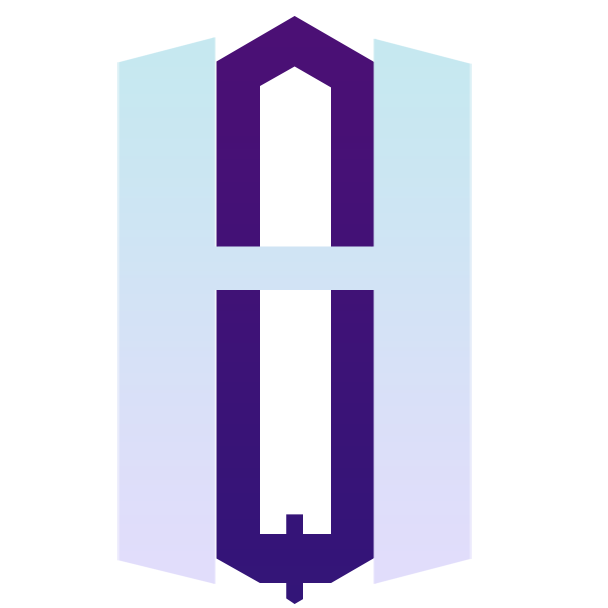
<style>
.page{position:relative;width:608px;height:608px;background:#ffffff}
.page>*{position:absolute;margin:0}
.t1{font:700px "Hex-monograms";letter-spacing:0.01em;color:#3f1377}
</style>
<div class="page">
<p class="t1" style="left:216px;top:16px;width:159px;height:588px">Q</p>
</div>
